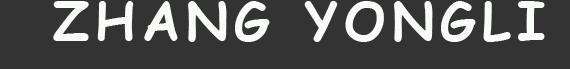
<style>
.page{position:relative;width:570px;height:69px;background:#333333}
.page>*{position:absolute;margin:0}
.t1{font:52px "ComicSansMS-Bold";letter-spacing:0.12em;color:#f9fdf7;text-transform:uppercase}
.t2{font:48px "ComicSansMS-Bold";letter-spacing:0.12em;color:#f9fdf7;text-transform:uppercase}
</style>
<div class="page">
<p class="t1" style="left:53px;top:1px;width:492px;height:41px"><span class="t2">  </span>zhang Yongli</p>
</div>
